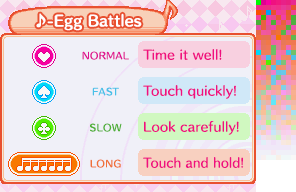
<style>
.page{position:relative;width:296px;height:192px;background:#f0f0f8}
.page>*{position:absolute;margin:0}
.t1{font:14px "HummingStd-B";letter-spacing:0.02em;color:#ffffff}
.t2{font:9px/36px "HummingStd-D";letter-spacing:0.025em;color:#e01090;text-transform:uppercase}
.t3{font:9px/36px "HummingStd-D";letter-spacing:0.05em;color:#48c0e8;text-transform:uppercase}
.t4{font:9px/36px "HummingStd-D";letter-spacing:0.05em;color:#50b038;text-transform:uppercase}
.t5{font:9px/36px "HummingStd-D";letter-spacing:0.05em;color:#f07038;text-transform:uppercase}
.t6{font:12px/36px "HummingStd-D";letter-spacing:0.02em;color:#f01080}
.t7{font:12px/36px "HummingStd-D";letter-spacing:0.02em;color:#f01080;scale:0.95 1}
</style>
<div class="page">
<p class="t1" style="left:36px;top:13px;width:106px;height:18px">♪-Egg Battles</p>
<p class="t2" style="left:82px;top:51px;width:47px;height:117px;text-align:center">Normal<br><span class="t3">Fast<br></span><span class="t4">Slow<br></span><span class="t5">Long</span></p>
<p class="t6" style="left:143px;top:49px;width:101px;height:119px">Time it well!<br>Touch quickly!<br>Look carefully!<br><span class="t7">Touch and hold!</span></p>
</div>
